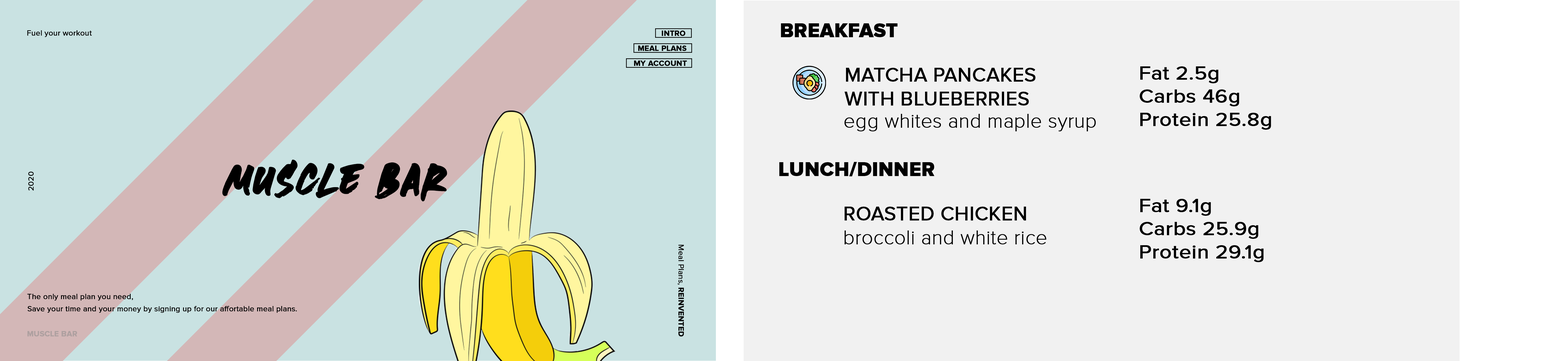
<style>
.page{position:relative;width:1568px;height:361px;background:#f1f1f1}
.page>*{position:absolute;margin:0}
.t1{font:20px "ProximaNova-Extrabld";color:#000000;font-weight:bold}
.t2{font:7.8px "ProximaNova-Regular";color:#000000;font-weight:bold}
.t3{font:7.8px "ProximaNova-Bold";color:#000000;font-weight:bold}
.t4{font:20px "ProximaNova-Regular";color:#000000;font-weight:bold}
.t5{font:19.4px "ProximaNova-Regular";color:#000000;font-weight:bold;scale:1.1 1}
.t6{font:20px "ProximaNovaT-Thin";color:#000000;font-weight:bold}
.t7{font:62.4px "Heaters";color:#000000;font-weight:bold}
.t8{font:7.8px "ProximaNovaA-Bold";color:#aea0a0;font-weight:bold}
</style>
<div class="page">
<p class="t1" style="left:781px;top:23px;width:117px;height:14px">BREAKFAST</p>
<p class="t2" style="left:27px;top:30px;width:65px;height:7px">Fuel your workout</p>
<p class="t3" style="left:662px;top:31px;width:23px;height:5px">INTRO</p>
<p class="t3" style="left:638px;top:45px;width:49px;height:6px">MEAL PLANS</p>
<p class="t3" style="left:634px;top:60px;width:53px;height:6px">MY ACCOUNT</p>
<p class="t4" style="left:845px;top:68px;width:190px;height:37px">MATCHA PANCAKES <br>WITH BLUEBERRIES</p>
<p class="t5" style="left:1140px;top:66px;width:131px;height:64px">Fat 2.5g <br>Carbs 46g<br>Protein 25.8g</p>
<p class="t6" style="left:844px;top:114px;width:252px;height:17px">egg whites and maple syrup</p>
<p class="t7" style="left:222px;top:159px;width:225px;height:42px">MUSCLE BAR</p>
<p class="t1" style="left:779px;top:162px;width:155px;height:14px">LUNCH/DINNER</p>
<p class="t2" style="left:28px;top:171px;width:6px;height:20px;rotate:-90deg">2020</p>
<p class="t4" style="left:845px;top:206px;width:181px;height:14px">ROASTED CHICKEN</p>
<p class="t5" style="left:1140px;top:199px;width:124px;height:63px">Fat 9.1g <br>Carbs 25.9g<br>Protein 29.1g</p>
<p class="t6" style="left:845px;top:230px;width:201px;height:14px">broccoli and white rice</p>
<p class="t2" style="left:677px;top:244px;width:7px;height:92px;rotate:90deg">Meal Plans,<span class="t3"> REINVENTED</span></p>
<p class="t2" style="left:27px;top:293px;width:106px;height:7px">The only meal plan you need,</p>
<p class="t2" style="left:27px;top:305px;width:270px;height:8px">Save your time and your money by signing up for our affortable meal plans.</p>
<p class="t8" style="left:27px;top:331px;width:50px;height:5px">MUSCLE BAR</p>
</div>
